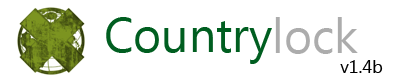
<style>
.page{position:relative;width:400px;height:80px;background:#ffffff}
.page>*{position:absolute;margin:0}
.t1{font:48px "Ebrima";color:#005e20}
.t2{font:48px "Ebrima";color:#acacac}
.t3{font:18px "Ebrima";color:#000000}
</style>
<div class="page">
<p class="t1" style="left:106px;top:17px;width:166px;height:47px">Country</p>
<p class="t2" style="left:275px;top:17px;width:83px;height:37px">lock</p>
<p class="t3" style="left:340px;top:60px;width:43px;height:13px">v1.4b</p>
</div>
